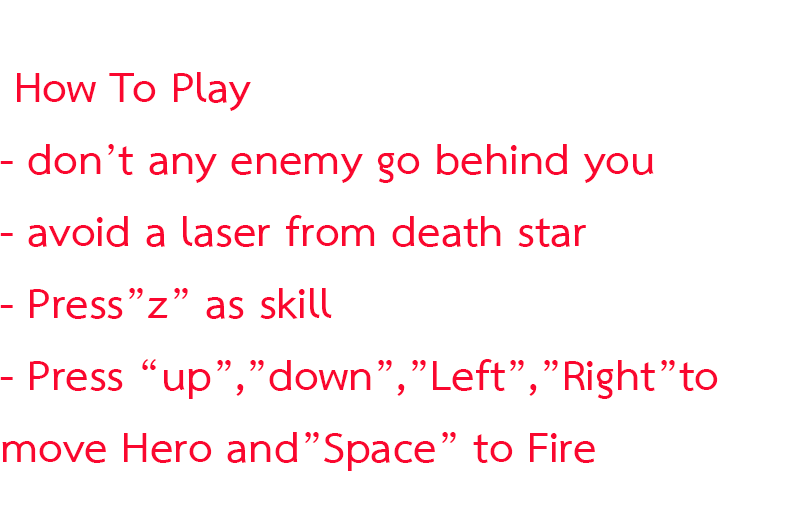
<style>
.page{position:relative;width:785px;height:524px;background:#ffffff}
.page>*{position:absolute;margin:0}
.t1{font:60px "THSarabunNew-Bold";color:#fa072f}
</style>
<div class="page">
<p class="t1" style="left:0px;top:72px;width:718px;height:399px">How To Play<br>- don’t any enemy go behind you<br>- avoid a laser from death star <br>- Press”z” as skill<br>- Press “up”,”down”,”Left”,”Right”to move Hero and”Space” to Fire</p>
</div>
